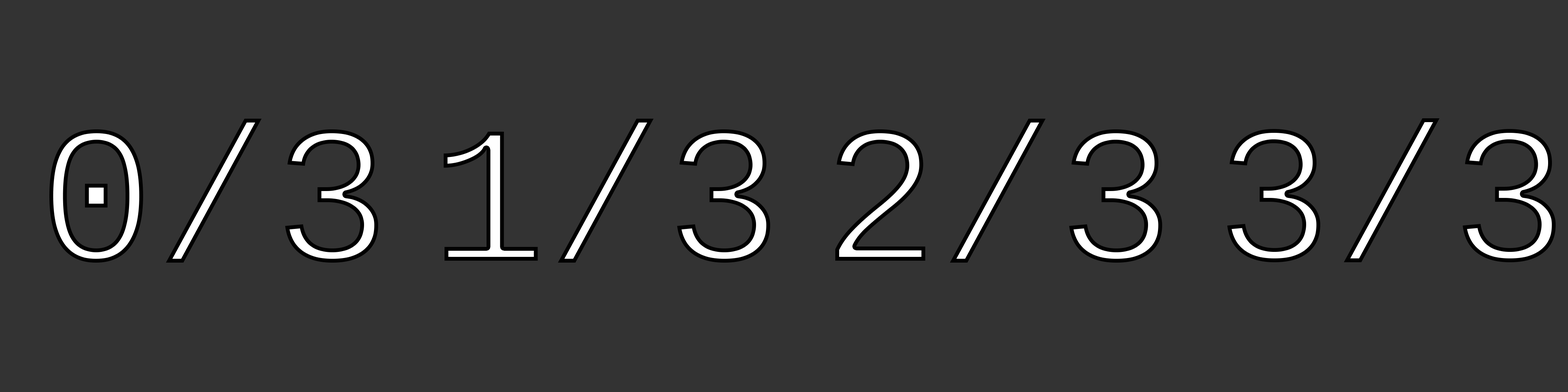
<style>
.page{position:relative;width:1568px;height:392px;background:#333333}
.page>*{position:absolute;margin:0}
.t1{font:196px "LiberationMono"}
</style>
<div class="page">
<p class="t1" style="left:49px;top:119px;width:329px;height:144px">0/3</p>
<p class="t1" style="left:444px;top:119px;width:326px;height:144px">1/3</p>
<p class="t1" style="left:835px;top:119px;width:327px;height:144px">2/3</p>
<p class="t1" style="left:1227px;top:118px;width:329px;height:144px">3/3</p>
</div>
